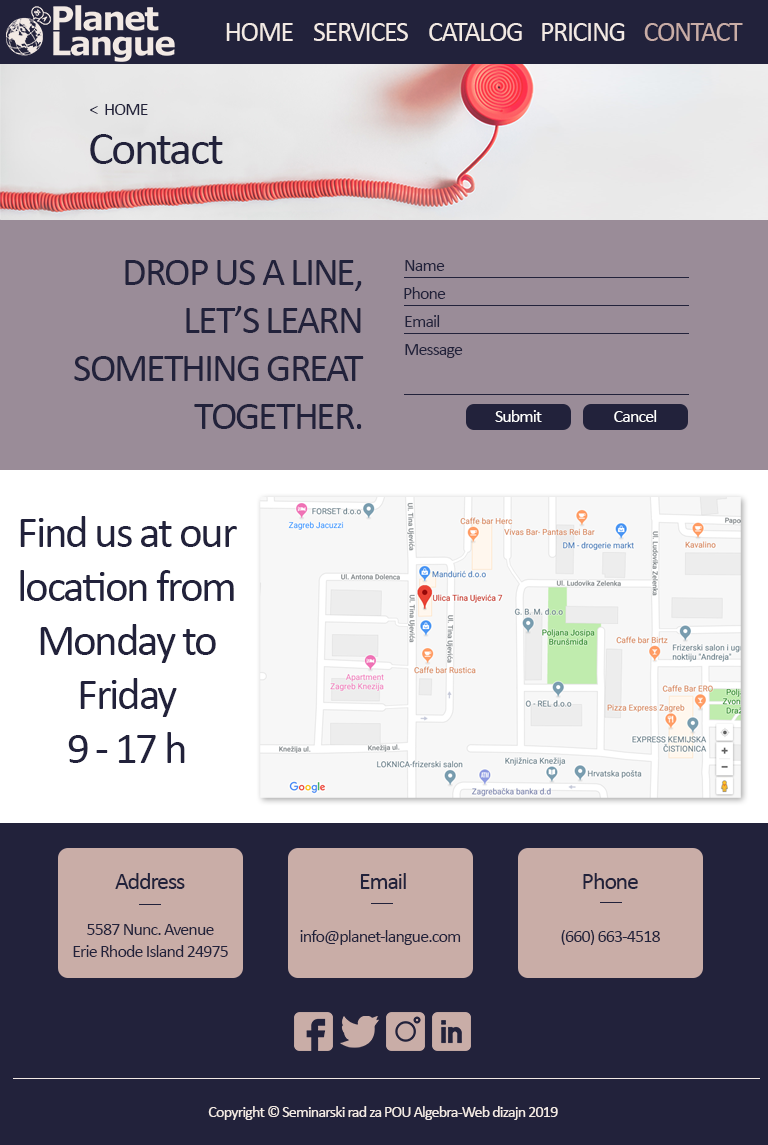
<style>
.page{position:relative;width:768px;height:1145px;background:#22223b}
.page>*{position:absolute;margin:0}
.t1{font:28px "Calibri";letter-spacing:-0.05em;color:#f2e9e4}
.t2{font:28px "Calibri";letter-spacing:-0.05em;color:#c9ada7}
.t3{font:18px "Calibri";letter-spacing:-0.05em;color:#22223b}
.t4{font:48px "Calibri";letter-spacing:-0.05em;color:#22223b}
.t5{font:40px "Calibri";letter-spacing:-0.05em;color:#22223b}
.t6{font:18px "Calibri";letter-spacing:-0.05em;color:#ffffff}
.t7{font:45px "Calibri";letter-spacing:-0.05em;color:#22223b}
.t8{font:24px "Calibri";letter-spacing:-0.05em;color:#22223b}
.t9{font:16px "Calibri";letter-spacing:-0.05em;color:#f2e9e4}
</style>
<div class="page">
<p class="t1" style="left:226px;top:23px;width:67px;height:18px">HOME</p>
<p class="t1" style="left:314px;top:23px;width:94px;height:18px">SERVICES</p>
<p class="t1" style="left:429px;top:23px;width:93px;height:18px">CATALOG</p>
<p class="t1" style="left:542px;top:23px;width:83px;height:18px">PRICING</p>
<p class="t2" style="left:644px;top:23px;width:99px;height:18px">CONTACT</p>
<p class="t3" style="left:90px;top:104px;width:58px;height:11px">&lt;  HOME</p>
<p class="t4" style="left:90px;top:134px;width:133px;height:30px">Contact</p>
<p class="t5" style="left:74px;top:260px;width:290px;height:169px;text-align:right">DROP US A LINE,<br>LET’S LEARN<br>SOMETHING GREAT<br>TOGETHER.</p>
<p class="t3" style="left:405px;top:260px;width:40px;height:11px">Name</p>
<p class="t3" style="left:404px;top:287px;width:42px;height:12px">Phone</p>
<p class="t3" style="left:405px;top:315px;width:35px;height:12px">Email</p>
<p class="t3" style="left:405px;top:344px;width:58px;height:14px">Message</p>
<p class="t6" style="left:495px;top:410px;width:47px;height:12px">Submit</p>
<p class="t6" style="left:614px;top:410px;width:43px;height:12px">Cancel</p>
<p class="t7" style="left:20px;top:516px;width:217px;height:247px;text-align:center">Find us at our location from Monday to Friday<br>9 - 17 h</p>
<p class="t8" style="left:115px;top:873px;width:70px;height:16px">Address</p>
<p class="t8" style="left:360px;top:873px;width:46px;height:16px">Email</p>
<p class="t8" style="left:583px;top:873px;width:55px;height:16px">Phone</p>
<p class="t3" style="left:73px;top:924px;width:155px;height:33px;text-align:center">5587 Nunc. Avenue<br>Erie Rhode Island 24975</p>
<p class="t3" style="left:300px;top:930px;width:161px;height:15px">info@planet-langue.com</p>
<p class="t3" style="left:561px;top:930px;width:99px;height:15px">(660) 663-4518</p>
<p class="t9" style="left:208px;top:1106px;width:350px;height:14px">Copyright © Seminarski rad za POU Algebra-Web dizajn 2019</p>
</div>
